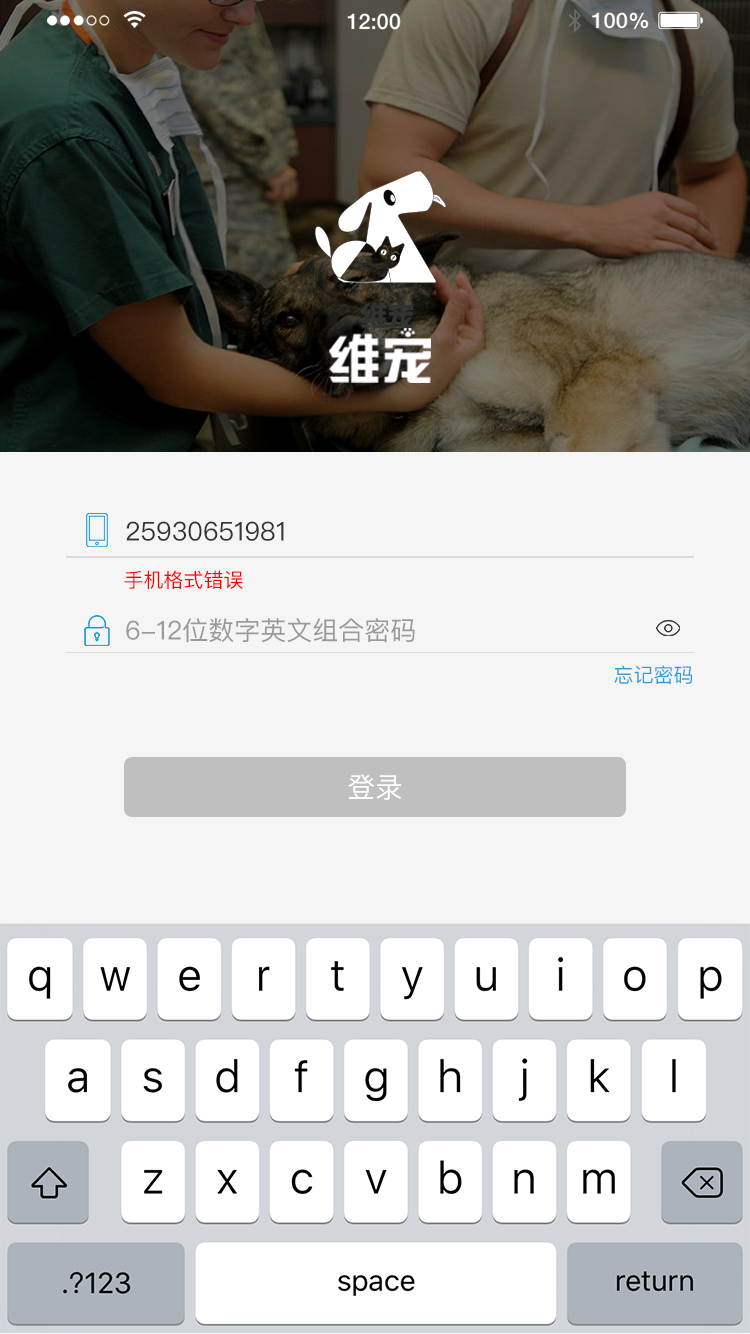
<style>
.page{position:relative;width:750px;height:1334px;background:#f5f5f5}
.page>*{position:absolute;margin:0}
.t1{font:26px "PingFangSC-Regular";color:#333333}
.t2{font:20px "PingFangSC-Regular";color:#ff0000}
.t3{font:26px "PingFangSC-Regular";color:#999999}
.t4{font:20px "PingFangSC-Regular";color:#2a9cda}
.t5{font:28px "PingFangSC-Regular";color:#ffffff}
</style>
<div class="page">
<p class="t1" style="left:126px;top:521px;width:158px;height:20px">25930651981</p>
<p class="t2" style="left:124px;top:570px;width:119px;height:19px">手机格式错误</p>
<p class="t3" style="left:126px;top:618px;width:289px;height:25px">6-12位数字英文组合密码</p>
<p class="t4" style="left:614px;top:665px;width:78px;height:19px">忘记密码</p>
<p class="t5" style="left:348px;top:774px;width:53px;height:26px">登录</p>
</div>
